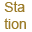
<style>
.page{position:relative;width:32px;height:32px;background:#ffffff}
.page>*{position:absolute;margin:0}
.t1{font:14px "ArialMT";color:#9c7c29}
</style>
<div class="page">
<p class="t1" style="left:4px;top:1px;width:22px;height:28px">Sta<br>tion</p>
</div>
